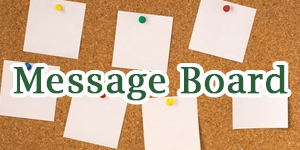
<style>
.page{position:relative;width:300px;height:150px}
.page>*{position:absolute;margin:0}
.t1{font:36px "LucidaBright";letter-spacing:0.01em;color:#296038;font-weight:bold}
</style>
<div class="page">
<p class="t1" style="left:13px;top:65px;width:275px;height:36px">Message Board</p>
</div>
